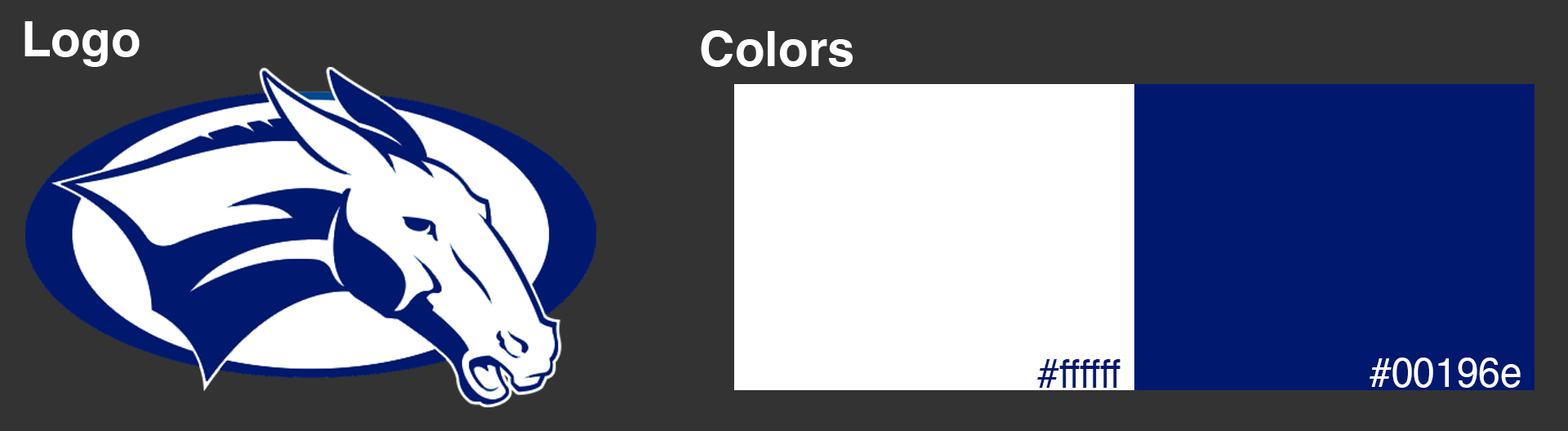
<style>
.page{position:relative;width:1568px;height:431px;background:#333333}
.page>*{position:absolute;margin:0}
.t1{font:49px "Helvetica-Bold";color:#ffffff}
.t2{font:39.2px "Helvetica";color:#00196e}
.t3{font:39.2px "Helvetica";color:#ffffff}
</style>
<div class="page">
<p class="t1" style="left:24px;top:21px;width:116px;height:46px">Logo</p>
<p class="t1" style="left:701px;top:30px;width:152px;height:37px">Colors</p>
<p class="t2" style="left:1037px;top:359px;width:83px;height:29px">#ffffff</p>
<p class="t3" style="left:1370px;top:358px;width:151px;height:30px">#00196e</p>
</div>
